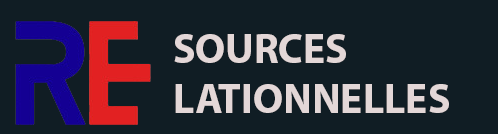
<style>
.page{position:relative;width:498px;height:134px;background:#101d24}
.page>*{position:absolute;margin:0}
.t1{font:41.7px "MyriadPro-Bold";color:#e3d7d7}
</style>
<div class="page">
<p class="t1" style="left:174px;top:34px;width:275px;height:79px">SOURCES<br>LATIONNELLES</p>
</div>
